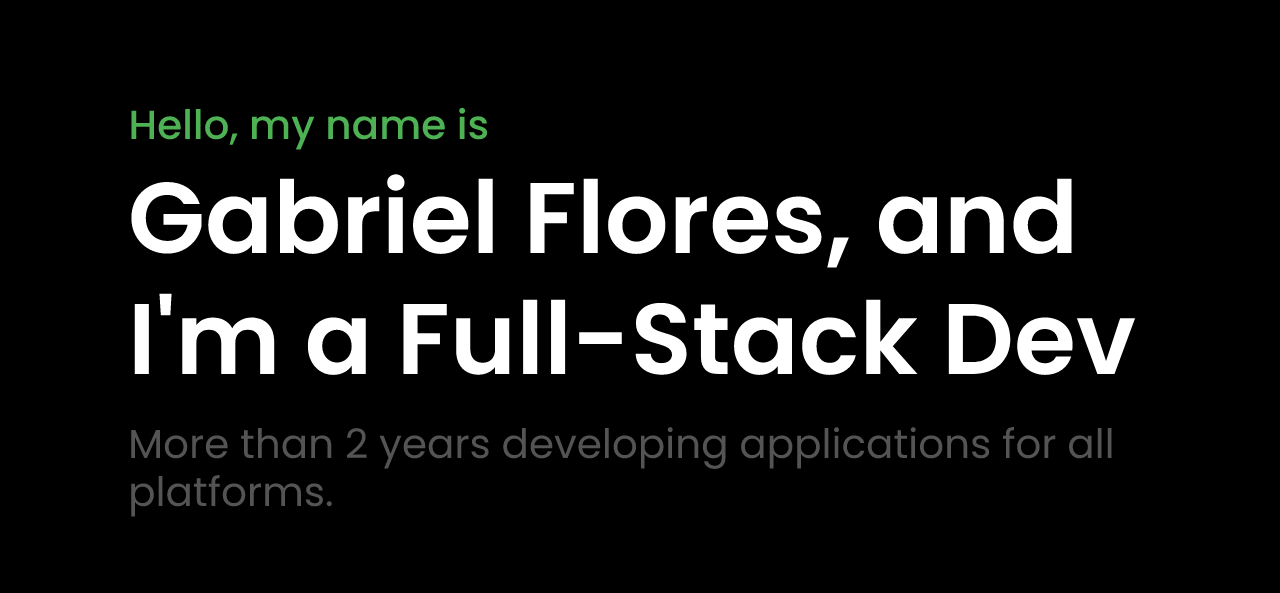
<style>
.page{position:relative;width:1280px;height:593px;background:#000000}
.page>*{position:absolute;margin:0}
.t1{font:40.5px "Poppins-Medium";color:#4eb254}
.t2{font:100.5px "Poppins-SemiBold";color:#ffffff}
.t3{font:40.5px "Poppins-Regular";color:#545454}
</style>
<div class="page">
<p class="t1" style="left:131px;top:107px;width:357px;height:43px">Hello, my name is</p>
<p class="t2" style="left:131px;top:174px;width:1004px;height:201px">Gabriel Flores, and <br>I'm a Full-Stack Dev</p>
<p class="t3" style="left:131px;top:427px;width:981px;height:90px">More than 2 years developing applications for all <br>platforms.</p>
</div>
